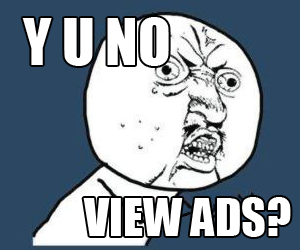
<style>
.page{position:relative;width:300px;height:250px;background:#2c4762}
.page>*{position:absolute;margin:0}
.t1{font:60px "Impact";color:#ffffff}
.t2{font:48px "Impact";color:#ffffff}
</style>
<div class="page">
<p class="t1" style="left:22px;top:17px;width:147px;height:49px">Y U NO</p>
<p class="t2" style="left:83px;top:197px;width:208px;height:40px">VIEW ADS?</p>
</div>
